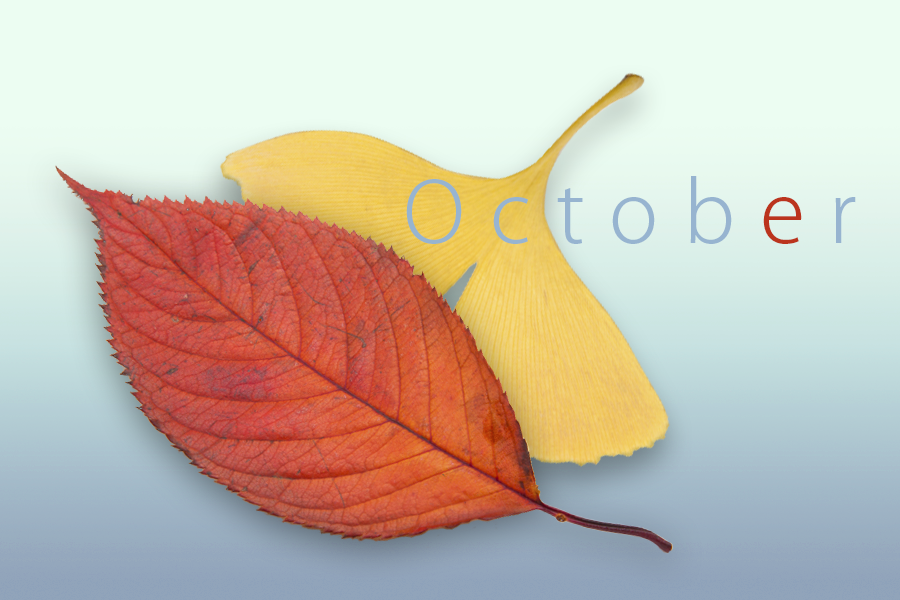
<style>
.page{position:relative;width:900px;height:600px;background:#ecfdf2}
.page>*{position:absolute;margin:0}
.t1{font:83.3px "KozGoPr6N-Light";letter-spacing:0.3em;color:#97b4d0}
.t2{font:83.3px "KozGoPr6N-Light";letter-spacing:0.3em;color:#bb341d}
</style>
<div class="page">
<p class="t1" style="left:406px;top:176px;width:450px;height:68px">Octob<span class="t2">e</span>r</p>
</div>
